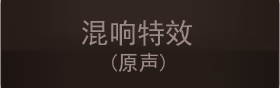
<style>
.page{position:relative;width:280px;height:88px;background:#261d18}
.page>*{position:absolute;margin:0}
.t1{font:28.1px "SimHei";color:#9b8987}
.t2{font:20.7px "SimHei";color:#9b8987}
</style>
<div class="page">
<p class="t1" style="left:82px;top:20px;width:110px;height:26px">混响特效</p>
<p class="t2" style="left:112px;top:52px;width:53px;height:21px">(原声)</p>
</div>
